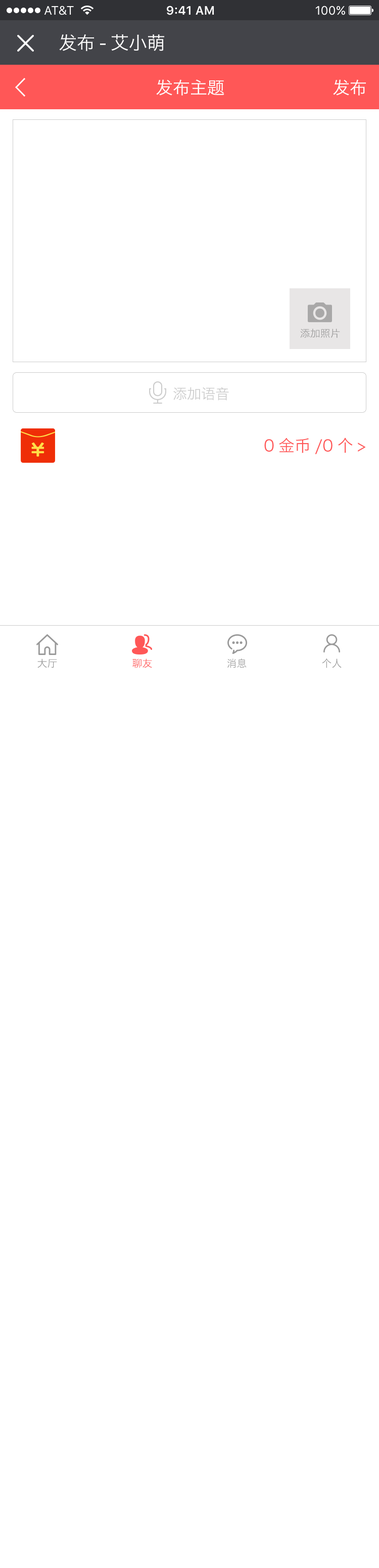
<style>
.page{position:relative;width:379px;height:1568px;background:#ffffff}
.page>*{position:absolute;margin:0}
.t1{font:18.2px "HiraginoSansGB-W3";color:#ffffff}
.t2{font:17.2px "HiraginoSansGB-W3";color:#ffffff}
.t3{font:10.1px "HiraginoSansGB-W3";color:#999999}
.t4{font:14.2px "HiraginoSansGB-W3";color:#cccccc}
.t5{font:16.2px "HiraginoSansGB-W3";color:#ff5757}
.t6{font:10.1px "HiraginoSansGB-W3";color:#ff5757}
</style>
<div class="page">
<p class="t1" style="left:59px;top:34px;width:105px;height:17px">发布-艾小萌</p>
<p class="t2" style="left:156px;top:79px;width:69px;height:17px">发布主题</p>
<p class="t2" style="left:333px;top:79px;width:33px;height:17px">发布</p>
<p class="t3" style="left:300px;top:329px;width:40px;height:9px">添加照片</p>
<p class="t4" style="left:173px;top:387px;width:56px;height:14px">添加语音</p>
<p class="t5" style="left:265px;top:438px;width:101px;height:16px">0金币/0个&gt;</p>
<p class="t3" style="left:37px;top:659px;width:20px;height:9px">大厅</p>
<p class="t6" style="left:133px;top:659px;width:19px;height:9px">聊友</p>
<p class="t3" style="left:228px;top:659px;width:19px;height:9px">消息</p>
<p class="t3" style="left:322px;top:658px;width:20px;height:10px">个人</p>
</div>
